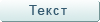
<style>
.page{position:relative;width:100px;height:22px}
.page>*{position:absolute;margin:0}
.t1{font:13px "ArialMT";letter-spacing:0.099em;color:#345a70}
</style>
<div class="page">
<p class="t1" style="left:29px;top:5px;width:38px;height:10px">Текст</p>
</div>
